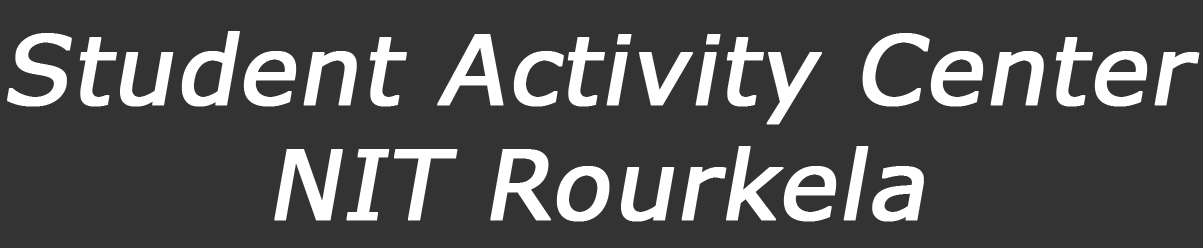
<style>
.page{position:relative;width:1203px;height:248px;background:#333333}
.page>*{position:absolute;margin:0}
.t1{font:96px "Verdana";color:#ffffff;font-weight:bold;font-style:italic}
</style>
<div class="page">
<p class="t1" style="left:7px;top:31px;width:1193px;height:191px;text-align:center">Student Activity Center<br>NIT Rourkela</p>
</div>
